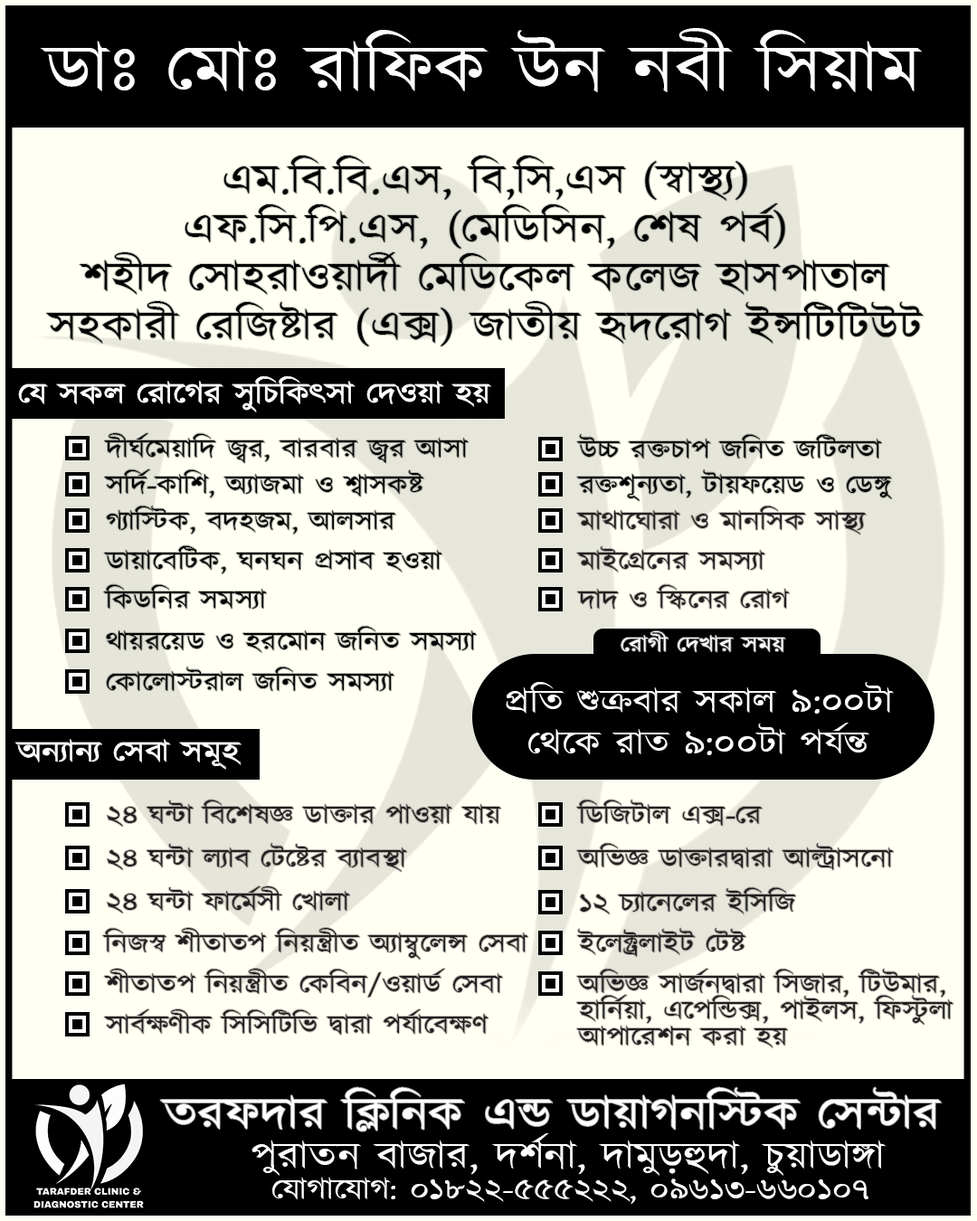
<style>
.page{position:relative;width:977px;height:1221px;background:#fffff3}
.page>*{position:absolute;margin:0}
.t1{font:67.8px "Kalpurush";color:#ffffff;scale:1.16 1}
.t2{font:41.4px/49px "Kalpurush";color:#000000;scale:1.16 1}
.t3{font:30.1px "Kalpurush";color:#ffffff;scale:1.16 1}
.t4{font:26.4px "Kalpurush";color:#000000;scale:1.16 1}
.t5{font:26.4px "Kalpurush";color:#231f20;scale:1.16 1}
.t6{font:22.6px "Kalpurush";color:#ffffff;scale:1.16 1}
.t7{font:33.9px/41.4px "Kalpurush";color:#ffffff;scale:1.16 1}
.t8{font:26.4px/26.4px "Kalpurush";color:#231f20;scale:1.16 1}
.t9{font:45.2px "Kalpurush";color:#ffffff;scale:1.16 1}
.t10{font:37.7px "Kalpurush";color:#ffffff;scale:1.16 1}
</style>
<div class="page">
<p class="t1" style="left:40px;top:28px;width:882px;height:64px">ডাঃ মোঃ রাফিক উন নবী সিয়াম</p>
<p class="t2" style="left:46px;top:156px;width:877px;height:190px;text-align:center">এম.বি.বি.এস, বি,সি,এস (স্বাস্থ্য)<br>এফ.সি.পি.এস, (মেডিসিন, শেষ পর্ব)<br>শহীদ সোহরাওয়ার্দী মেডিকেল কলেজ হাসপাতাল<br>সহকারী রেজিষ্টার (এক্স) জাতীয় হৃদরোগ ইন্সটিটিউট</p>
<p class="t3" style="left:18px;top:375px;width:473px;height:38px">যে সকল রোগের সুচিকিৎসা দেওয়া হয়</p>
<p class="t4" style="left:104px;top:433px;width:364px;height:30px">দীর্ঘমেয়াদি জ্বর, বারবার জ্বর আসা</p>
<p class="t4" style="left:576px;top:434px;width:306px;height:25px">উচ্চ রক্তচাপ জনিত জটিলতা</p>
<p class="t4" style="left:104px;top:469px;width:320px;height:29px">সর্দি-কাশি, অ্যাজমা ও শ্বাসকষ্ট</p>
<p class="t4" style="left:576px;top:469px;width:316px;height:32px">রক্তশূন্যতা, টায়ফয়েড ও ডেঙ্গু</p>
<p class="t4" style="left:106px;top:506px;width:290px;height:28px">গ্যাস্টিক, বদহজম, আলসার</p>
<p class="t5" style="left:576px;top:506px;width:290px;height:28px">মাথাঘোরা ও মানসিক সাস্থ্য</p>
<p class="t4" style="left:104px;top:545px;width:338px;height:29px">ডায়াবেটিক, ঘনঘন প্রসাব হওয়া</p>
<p class="t5" style="left:576px;top:546px;width:189px;height:26px">মাইগ্রেনের সমস্যা</p>
<p class="t4" style="left:103px;top:584px;width:164px;height:25px">কিডনির সমস্যা</p>
<p class="t5" style="left:577px;top:584px;width:213px;height:26px">দাদ ও স্কিনের রোগ</p>
<p class="t4" style="left:106px;top:626px;width:371px;height:27px">থায়রয়েড ও হরমোন জনিত সমস্যা</p>
<p class="t6" style="left:620px;top:631px;width:166px;height:21px">রোগী দেখার সময়</p>
<p class="t4" style="left:106px;top:667px;width:288px;height:24px">কোলোস্টরাল জনিত সমস্যা</p>
<p class="t7" style="left:506px;top:682px;width:388px;height:73px;text-align:center">প্রতি শুক্রবার সকাল ৯:০০টা<br>থেকে রাত ৯:০০টা পর্যন্ত</p>
<p class="t3" style="left:15px;top:739px;width:226px;height:31px">অন্যান্য সেবা সমূহ</p>
<p class="t5" style="left:107px;top:799px;width:394px;height:28px">২৪ ঘন্টা বিশেষজ্ঞ ডাক্তার পাওয়া যায়</p>
<p class="t5" style="left:576px;top:799px;width:186px;height:27px">ডিজিটাল এক্স-রে</p>
<p class="t5" style="left:107px;top:843px;width:300px;height:29px">২৪ ঘন্টা ল্যাব টেষ্টের ব্যাবস্থা</p>
<p class="t5" style="left:576px;top:843px;width:318px;height:27px">অভিজ্ঞ ডাক্তারদ্বারা আল্ট্রাসনো</p>
<p class="t5" style="left:107px;top:886px;width:243px;height:27px">২৪ ঘন্টা ফার্মেসী খোলা</p>
<p class="t5" style="left:580px;top:887px;width:216px;height:27px">১২ চ্যানেলের ইসিজি</p>
<p class="t5" style="left:102px;top:928px;width:426px;height:32px">নিজস্ব শীতাতপ নিয়ন্ত্রীত অ্যাম্বুলেন্স সেবা</p>
<p class="t5" style="left:577px;top:928px;width:169px;height:29px">ইলেক্ট্রলাইট টেষ্ট</p>
<p class="t5" style="left:104px;top:969px;width:399px;height:29px">শীতাতপ নিয়ন্ত্রীত কেবিন/ওয়ার্ড সেবা</p>
<p class="t8" style="left:576px;top:969px;width:377px;height:79px">অভিজ্ঞ সার্জনদ্বারা সিজার, টিউমার,<br>হার্নিয়া, এপেন্ডিক্স, পাইলস, ফিস্টুলা <br>আপারেশন করা হয়</p>
<p class="t5" style="left:104px;top:1009px;width:384px;height:26px">সার্বক্ষণীক সিসিটিভি দ্বারা পর্যাবেক্ষণ</p>
<p class="t9" style="left:160px;top:1087px;width:781px;height:44px">তরফদার ক্লিনিক এন্ড ডায়াগনস্টিক সেন্টার</p>
<p class="t10" style="left:251px;top:1133px;width:634px;height:43px">পুরাতন বাজার, দর্শনা, দামুড়হুদা, চুয়াডাঙ্গা</p>
<p class="t3" style="left:272px;top:1177px;width:596px;height:27px">যোগাযোগ: ০১৮২২-৫৫৫২২২, ০৯৬১৩-৬৬০১০৭</p>
</div>
